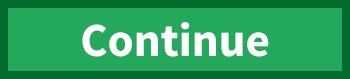
<style>
.page{position:relative;width:350px;height:79px;background:#24a95c}
.page>*{position:absolute;margin:0}
.t1{font:47.1px "SourceSansPro-Bold";color:#ffffff}
</style>
<div class="page">
<p class="t1" style="left:82px;top:22px;width:187px;height:35px">Continue</p>
</div>
